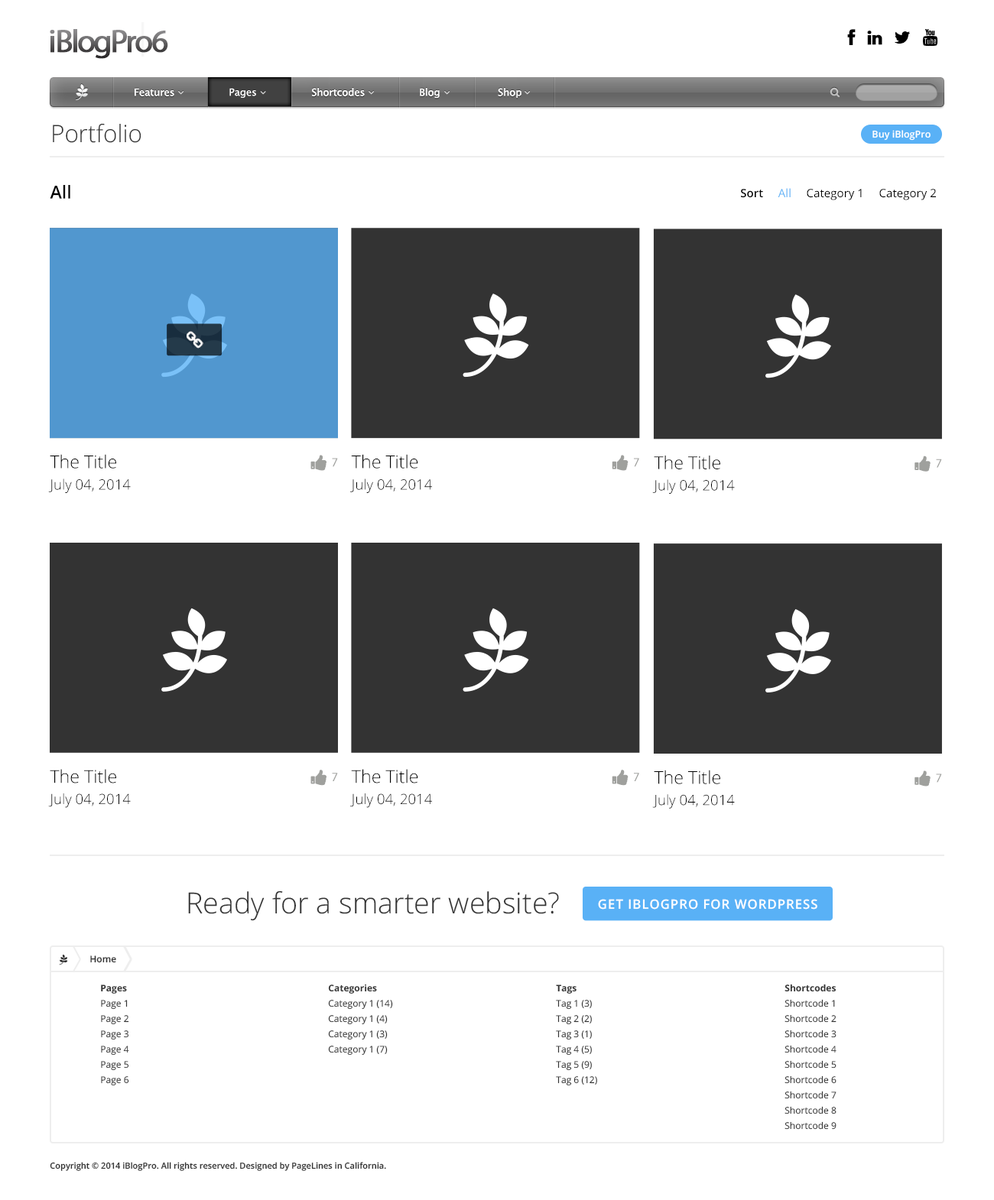
<style>
.page{position:relative;width:994px;height:1200px;background:#ffffff}
.page>*{position:absolute;margin:0}
.t1{font:32.1px "MyriadPro-Regular";letter-spacing:-0.065em;font-weight:bold}
.t2{font:9.9px "LucidaSansUnicode";color:#ffffff}
.t3{font:24px "OpenSans-Light";color:#333333}
.t4{font:9.6px "OpenSans-Semibold";color:#ffffff}
.t5{font:17.7px "OpenSans-Semibold";color:#000000}
.t6{font:11.5px "OpenSans";color:#000000}
.t7{font:11.5px "OpenSans-Semibold";color:#000000}
.t8{font:11.5px "OpenSans";color:#59b1f6}
.t9{font:17.7px "OpenSans-Light";color:#000000}
.t10{font:14.2px "OpenSans-Light";color:#000000}
.t11{font:29px "OpenSans-Light";color:#333333}
.t12{font:12.9px "OpenSans-Semibold";letter-spacing:0.06em;color:#ffffff;text-transform:uppercase}
.t13{font:9.2px "OpenSans-Semibold";color:#333333}
.t14{font:9.2px/15.3px "OpenSans";color:#333333}
.t15{font:9.2px/15.3px "OpenSans-Bold";color:#333333}
.t16{font:8.4px "OpenSans-Semibold";color:#333333}
</style>
<div class="page">
<p class="t1" style="left:50px;top:29px;width:118px;height:30px">iBlogPro6</p>
<p class="t2" style="left:135px;top:88px;width:386px;height:10px">Features         Pages         Shortcodes                Blog             Shop</p>
<p class="t2" style="left:135px;top:88px;width:386px;height:10px">Features         Pages         Shortcodes                Blog             Shop</p>
<p class="t2" style="left:229px;top:88px;width:27px;height:10px">Pages</p>
<p class="t3" style="left:53px;top:123px;width:88px;height:20px">Portfolio</p>
<p class="t4" style="left:872px;top:130px;width:58px;height:11px">Buy iBlogPro</p>
<p class="t5" style="left:50px;top:185px;width:20px;height:14px">All</p>
<p class="t6" style="left:741px;top:188px;width:195px;height:12px"><span class="t7">Sort     </span><span class="t8">All     </span>Category 1     Category 2</p>
<p class="t9" style="left:50px;top:454px;width:66px;height:15px">The Title</p>
<p class="t9" style="left:351px;top:454px;width:67px;height:15px">The Title</p>
<p class="t9" style="left:654px;top:456px;width:66px;height:13px">The Title</p>
<p class="t10" style="left:48px;top:478px;width:83px;height:15px">July 04, 2014</p>
<p class="t10" style="left:350px;top:478px;width:82px;height:15px">July 04, 2014</p>
<p class="t10" style="left:652px;top:479px;width:83px;height:15px">July 04, 2014</p>
<p class="t9" style="left:50px;top:769px;width:66px;height:14px">The Title</p>
<p class="t9" style="left:351px;top:769px;width:67px;height:14px">The Title</p>
<p class="t9" style="left:654px;top:770px;width:66px;height:14px">The Title</p>
<p class="t10" style="left:48px;top:793px;width:83px;height:15px">July 04, 2014</p>
<p class="t10" style="left:350px;top:793px;width:82px;height:15px">July 04, 2014</p>
<p class="t10" style="left:652px;top:794px;width:83px;height:15px">July 04, 2014</p>
<p class="t11" style="left:188px;top:890px;width:371px;height:31px">Ready for a smarter website?</p>
<p class="t12" style="left:598px;top:899px;width:219px;height:11px">Get iBlogPro for WordPress</p>
<p class="t13" style="left:90px;top:955px;width:26px;height:8px">Home</p>
<p class="t14" style="left:101px;top:984px;width:28px;height:102px"><span class="t15">Pages<br></span>Page 1<br>Page 2<br>Page 3<br>Page 4<br>Page 5<br>Page 6</p>
<p class="t14" style="left:328px;top:984px;width:65px;height:72px"><span class="t15">Categories<br></span>Category 1 (14)<br>Category 1 (4)<br>Category 1 (3)<br>Category 1 (7)</p>
<p class="t14" style="left:556px;top:984px;width:41px;height:102px"><span class="t15">Tags<br></span>Tag 1 (3)<br>Tag 2 (2)<br>Tag 3 (1)<br>Tag 4 (5)<br>Tag 5 (9)<br>Tag 6 (12)</p>
<p class="t14" style="left:784px;top:984px;width:52px;height:146px"><span class="t15">Shortcodes<br></span>Shortcode 1<br>Shortcode 2<br>Shortcode 3<br>Shortcode 4<br>Shortcode 5<br>Shortcode 6<br>Shortcode 7<br>Shortcode 8<br>Shortcode 9</p>
<p class="t16" style="left:50px;top:1162px;width:336px;height:9px">Copyright © 2014 iBlogPro. All rights reserved. Designed by PageLines in California.</p>
</div>
